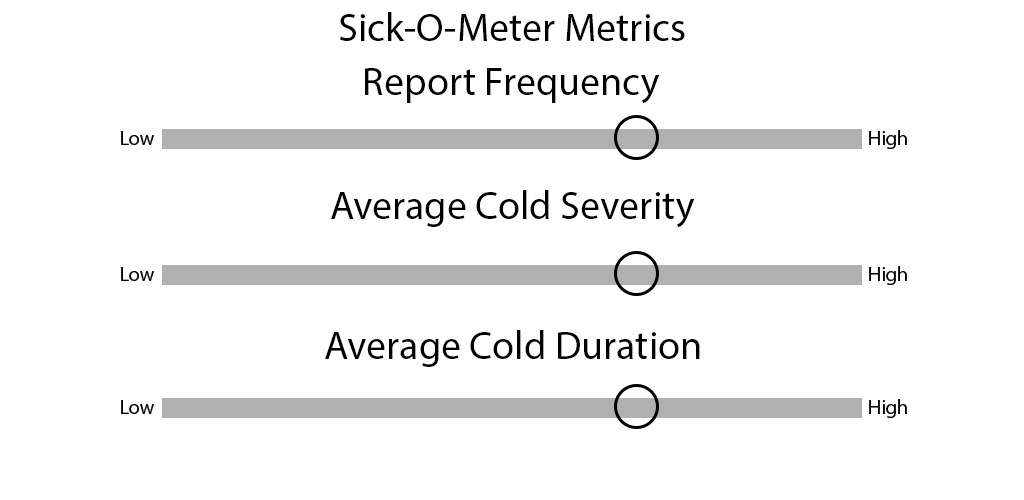
<style>
.page{position:relative;width:1024px;height:500px;background:#ffffff}
.page>*{position:absolute;margin:0}
.t1{font:40px "MyriadPro-Regular";color:#000000}
</style>
<div class="page">
<p class="t1" style="left:340px;top:12px;width:345px;height:29px">Sick-O-Meter Metrics</p>
<p class="t1" style="left:365px;top:68px;width:295px;height:36px">Report Frequency</p>
<p class="t1" style="left:331px;top:190px;width:364px;height:38px">Average Cold Severity</p>
<p class="t1" style="left:325px;top:330px;width:375px;height:37px">Average Cold Duration</p>
</div>
